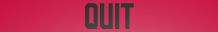
<style>
.page{position:relative;width:218px;height:32px}
.page>*{position:absolute;margin:0}
.t1{font:35px "Schluber";color:#3a3a3a}
</style>
<div class="page">
<p class="t1" style="left:85px;top:3px;width:49px;height:26px">quit</p>
</div>
